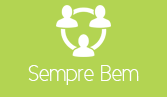
<style>
.page{position:relative;width:167px;height:97px;background:#b3d452}
.page>*{position:absolute;margin:0}
.t1{font:22.7px "CicleFina";color:#ffffff}
</style>
<div class="page">
<p class="t1" style="left:28px;top:65px;width:111px;height:20px">Sempre Bem</p>
</div>
